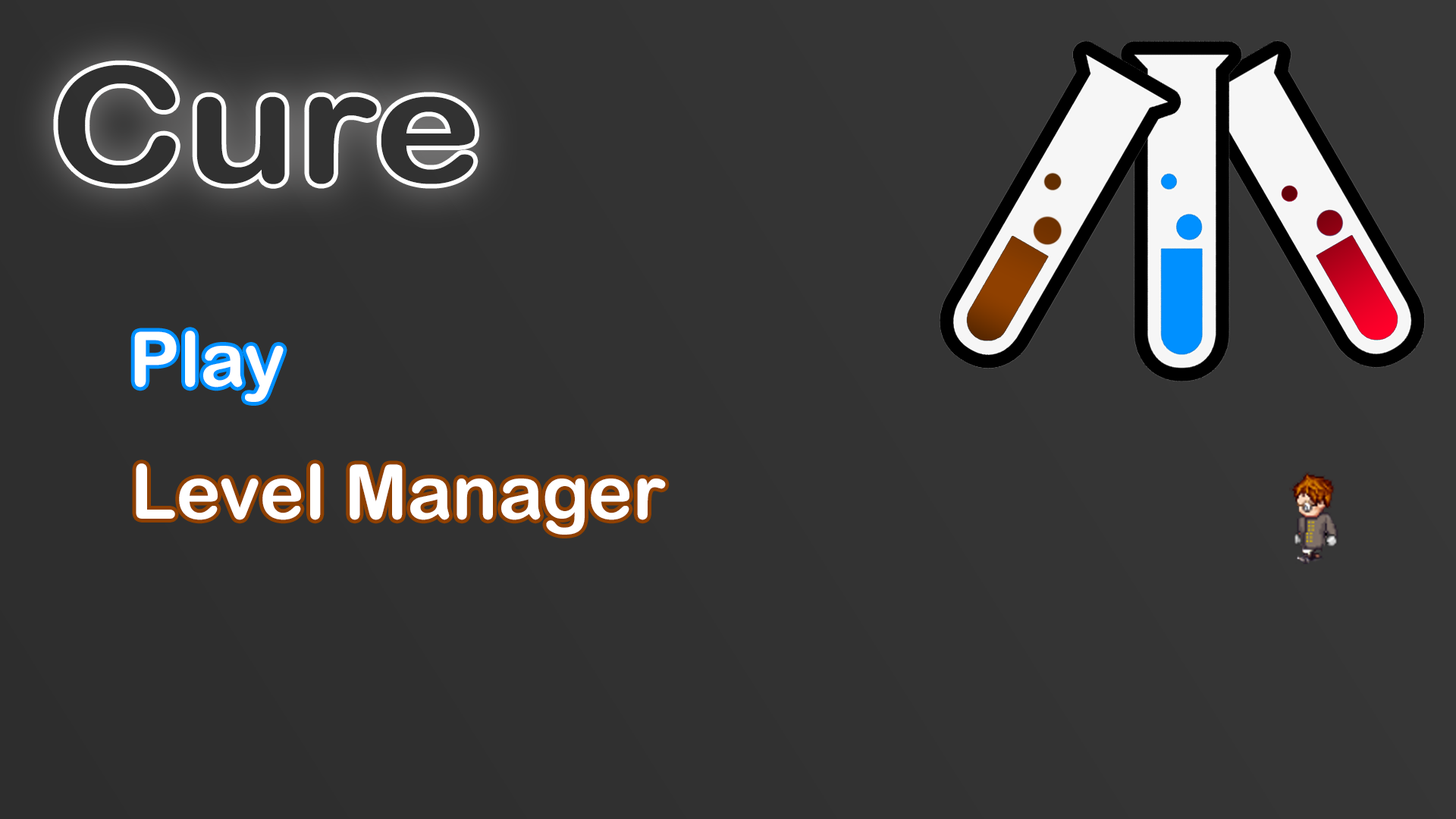
<style>
.page{position:relative;width:1456px;height:819px}
.page>*{position:absolute;margin:0}
.t1{font:160.8px "ArialRoundedMTBold";color:#303030;scale:1.15 1}
.t2{font:75.8px "ArialRoundedMTBold";color:#ffffff}
</style>
<div class="page">
<p class="t1" style="left:58px;top:64px;width:417px;height:120px">Cure</p>
<p class="t2" style="left:134px;top:331px;width:150px;height:71px">Play</p>
<p class="t2" style="left:136px;top:463px;width:530px;height:72px">Level Manager</p>
</div>
